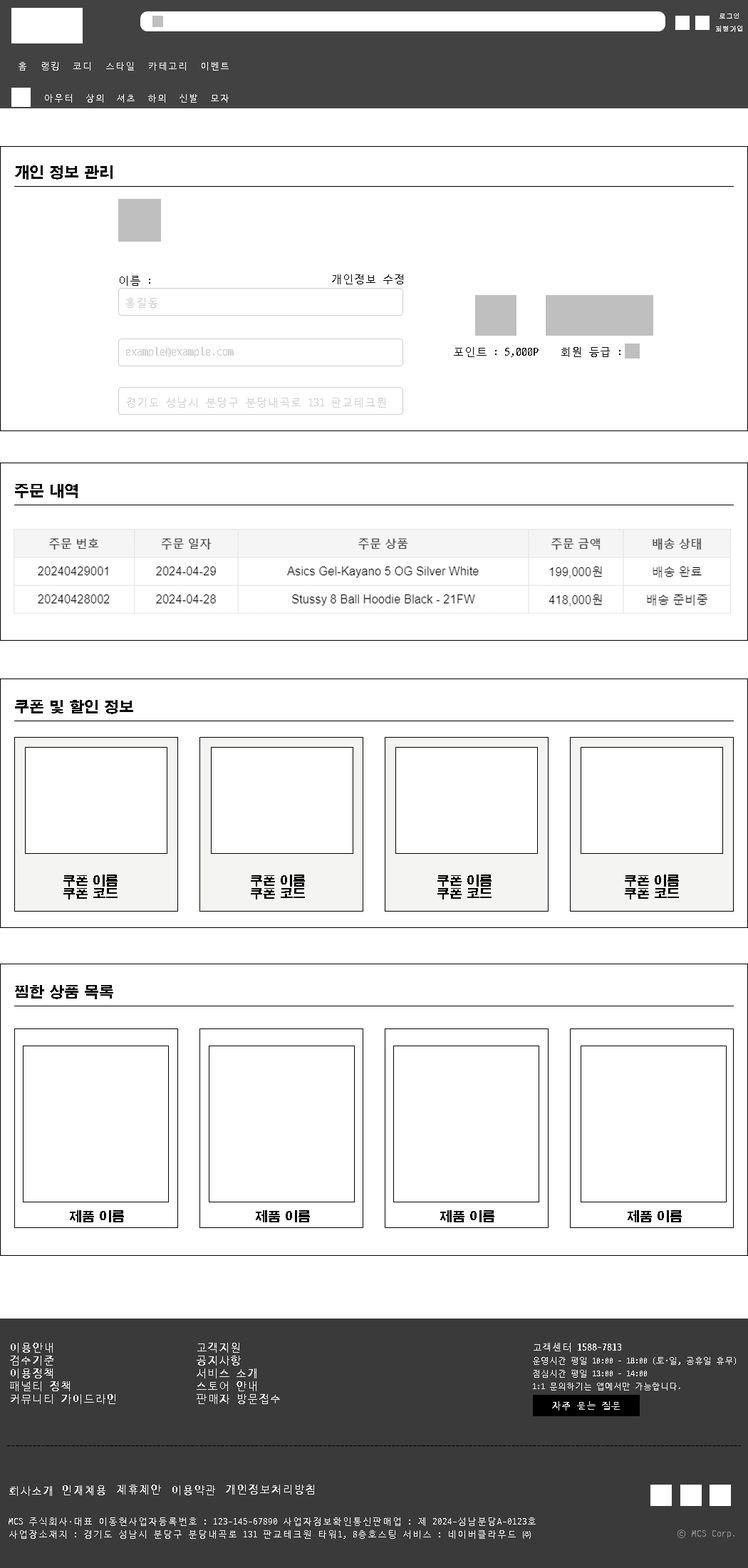
<style>
.page{position:relative;width:748px;height:1568px;background:#ffffff}
.page>*{position:absolute;margin:0}
.t1{font:7.1px "Gulim";color:#ffffff}
.t2{font:9.3px "D2Coding";color:#ffffff}
.t3{font:15px "H2gtrE";color:#000000}
.t4{font:11.4px "D2Coding";color:#000000}
.t5{font:11.4px "D2Coding";color:#cccccc}
.t6{font:12.8px/12.8px "H2gtrE";color:#000000}
.t7{font:12.8px "H2gtrE";color:#000000}
.t8{font:11.4px/12.8px "D2CodingBold";color:#fafafa}
.t9{font:8.6px/12.8px "D2Coding";color:#fafafa}
.t10{font:10px/12.8px "D2CodingBold";color:#fafafa}
.t11{font:10px "D2CodingBold";color:#fafafa}
.t12{font:11.4px "D2CodingBold";color:#fafafa}
.t13{font:9.3px/12.8px "D2Coding";color:#fafafa}
.t14{font:9.3px "D2Coding";color:#919191}
</style>
<div class="page">
<p class="t1" style="left:720px;top:13px;width:19px;height:6px">로그인</p>
<p class="t1" style="left:716px;top:26px;width:27px;height:6px">회원가입</p>
<p class="t2" style="left:19px;top:62px;width:7px;height:9px">홈</p>
<p class="t2" style="left:42px;top:62px;width:16px;height:9px">랭킹</p>
<p class="t2" style="left:73px;top:62px;width:18px;height:9px">코디</p>
<p class="t2" style="left:106px;top:62px;width:28px;height:9px">스타일</p>
<p class="t2" style="left:149px;top:62px;width:37px;height:9px">카테고리</p>
<p class="t2" style="left:202px;top:62px;width:27px;height:9px">이벤트</p>
<p class="t2" style="left:45px;top:94px;width:27px;height:9px">아우터</p>
<p class="t2" style="left:86px;top:94px;width:17px;height:9px">상의</p>
<p class="t2" style="left:117px;top:94px;width:18px;height:9px">셔츠</p>
<p class="t2" style="left:148px;top:94px;width:17px;height:9px">하의</p>
<p class="t2" style="left:180px;top:94px;width:17px;height:9px">신발</p>
<p class="t2" style="left:211px;top:94px;width:18px;height:9px">모자</p>
<p class="t3" style="left:15px;top:165px;width:98px;height:15px">개인 정보 관리</p>
<p class="t4" style="left:120px;top:276px;width:30px;height:10px">이름 :</p>
<p class="t4" style="left:332px;top:274px;width:71px;height:10px">개인정보 수정</p>
<p class="t5" style="left:125px;top:298px;width:33px;height:10px">홍길동</p>
<p class="t5" style="left:126px;top:347px;width:108px;height:10px">example@example.com</p>
<p class="t4" style="left:454px;top:347px;width:85px;height:10px">포인트 : 5,000P</p>
<p class="t4" style="left:562px;top:347px;width:59px;height:10px">회원 등급 :</p>
<p class="t5" style="left:127px;top:398px;width:259px;height:10px">경기도 성남시 분당구 분당내곡로 131 판교테크원</p>
<p class="t3" style="left:15px;top:484px;width:63px;height:14px">주문 내역</p>
<p class="t3" style="left:15px;top:700px;width:118px;height:14px">쿠폰 및 할인 정보</p>
<p class="t6" style="left:63px;top:875px;width:55px;height:24px">쿠폰 이름<br>쿠폰 코드</p>
<p class="t6" style="left:251px;top:875px;width:54px;height:24px">쿠폰 이름<br>쿠폰 코드</p>
<p class="t6" style="left:438px;top:875px;width:54px;height:24px">쿠폰 이름<br>쿠폰 코드</p>
<p class="t6" style="left:625px;top:875px;width:54px;height:24px">쿠폰 이름<br>쿠폰 코드</p>
<p class="t3" style="left:15px;top:985px;width:98px;height:14px">찜한 상품 목록</p>
<p class="t7" style="left:70px;top:1210px;width:54px;height:12px">제품 이름</p>
<p class="t7" style="left:256px;top:1210px;width:54px;height:12px">제품 이름</p>
<p class="t7" style="left:440px;top:1210px;width:55px;height:12px">제품 이름</p>
<p class="t7" style="left:628px;top:1210px;width:54px;height:12px">제품 이름</p>
<p class="t8" style="left:10px;top:1343px;width:105px;height:61px">이용안내<br>검수기준<br>이용정책<br>패널티 정책<br>커뮤니티 가이드라인</p>
<p class="t8" style="left:197px;top:1343px;width:83px;height:61px">고객지원<br>공지사항<br>서비스 소개<br>스토어 안내<br>판매자 방문접수</p>
<p class="t9" style="left:533px;top:1343px;width:203px;height:48px"><span class="t10">고객센터 1588-7813<br></span>운영시간 평일 10:00 - 18:00 (토·일, 공휴일 휴무)<br>점심시간 평일 13:00 - 14:00<br>1:1 문의하기는 앱에서만 가능합니다.</p>
<p class="t11" style="left:552px;top:1401px;width:68px;height:9px">자주 묻는 질문</p>
<p class="t12" style="left:9px;top:1486px;width:43px;height:10px">회사소개</p>
<p class="t12" style="left:63px;top:1485px;width:42px;height:10px">인재채용</p>
<p class="t12" style="left:117px;top:1485px;width:44px;height:10px">제휴제안</p>
<p class="t12" style="left:172px;top:1485px;width:43px;height:10px">이용약관</p>
<p class="t12" style="left:226px;top:1485px;width:88px;height:10px">개인정보처리방침</p>
<p class="t13" style="left:9px;top:1517px;width:527px;height:22px">MCS 주식회사·대표 이동현사업자등록번호 : 123-145-67890 사업자정보확인통신판매업 : 제 2024-성남분당A-0123호<br>사업장소재지 : 경기도 성남시 분당구 분당내곡로 131 판교테크원 타워1, 8층호스팅 서비스 : 네이버클라우드 ㈜</p>
<p class="t14" style="left:678px;top:1530px;width:57px;height:8px">ⓒ MCS Corp.</p>
</div>
